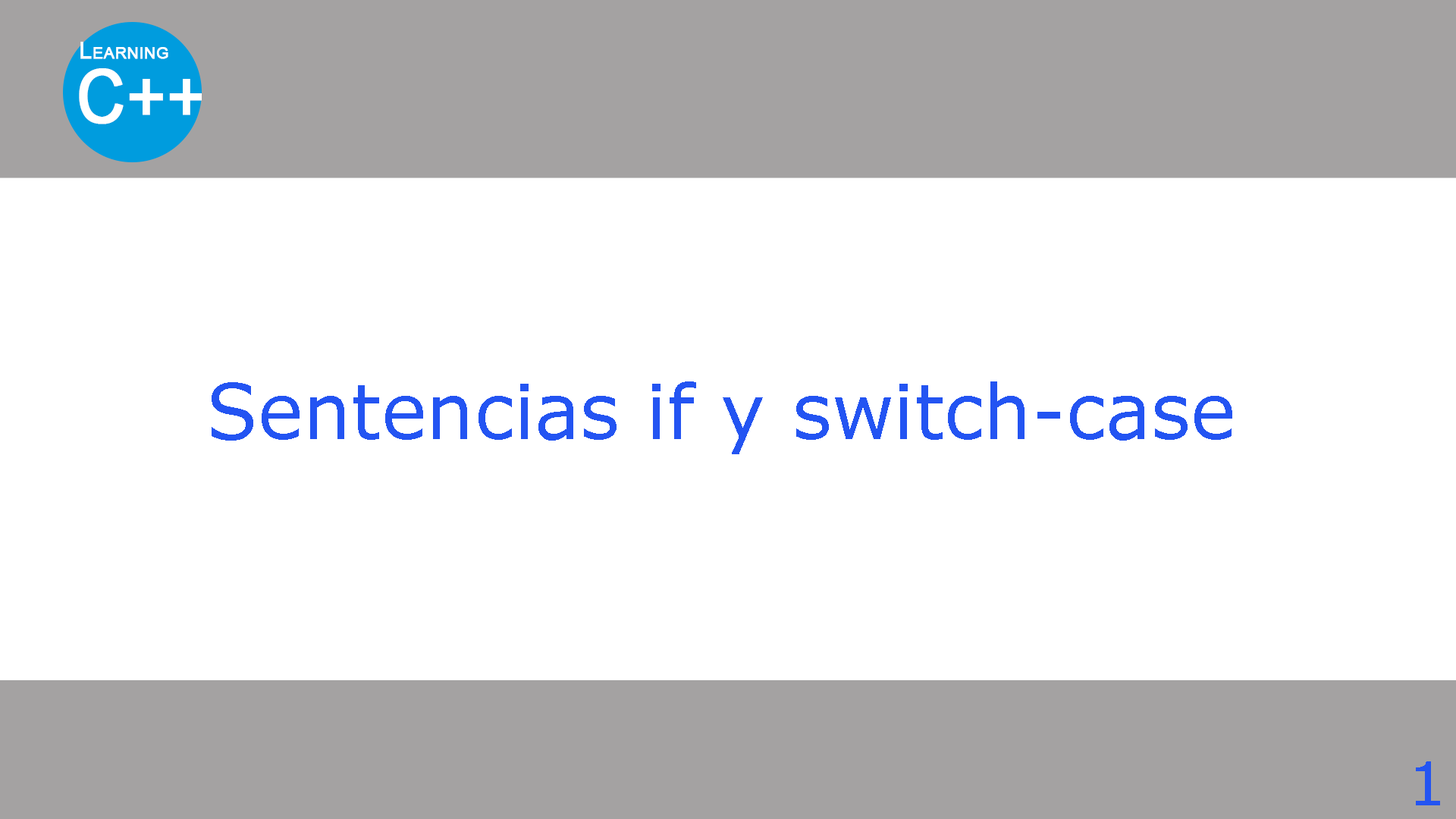
<style>
.page{position:relative;width:1456px;height:819px;background:#ffffff}
.page>*{position:absolute;margin:0}
.t1{font:75.8px "Verdana";color:#2354f2}
.t2{font:60.7px "Verdana";color:#2354f2}
</style>
<div class="page">
<p class="t1" style="left:212px;top:381px;width:1020px;height:73px">Sentencias if y switch-case</p>
<p class="t2" style="left:1416px;top:761px;width:24px;height:44px">1</p>
</div>
